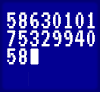
<style>
.page{position:relative;width:100px;height:92px;background:#030092}
.page>*{position:absolute;margin:0}
.t1{font:27px/18px "VT323-Regular";letter-spacing:0.005em;color:#ffffff}
</style>
<div class="page">
<p class="t1" style="left:7px;top:12px;width:88px;height:53px">58630101<br>75329940<br>58</p>
</div>
